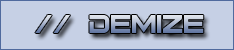
<style>
.page{position:relative;width:234px;height:50px;background:#c6d0e5}
.page>*{position:absolute;margin:0}
.t1{font:35px "Bitsumishi"}
</style>
<div class="page">
<p class="t1" style="left:35px;top:15px;width:169px;height:18px">// demize</p>
</div>
